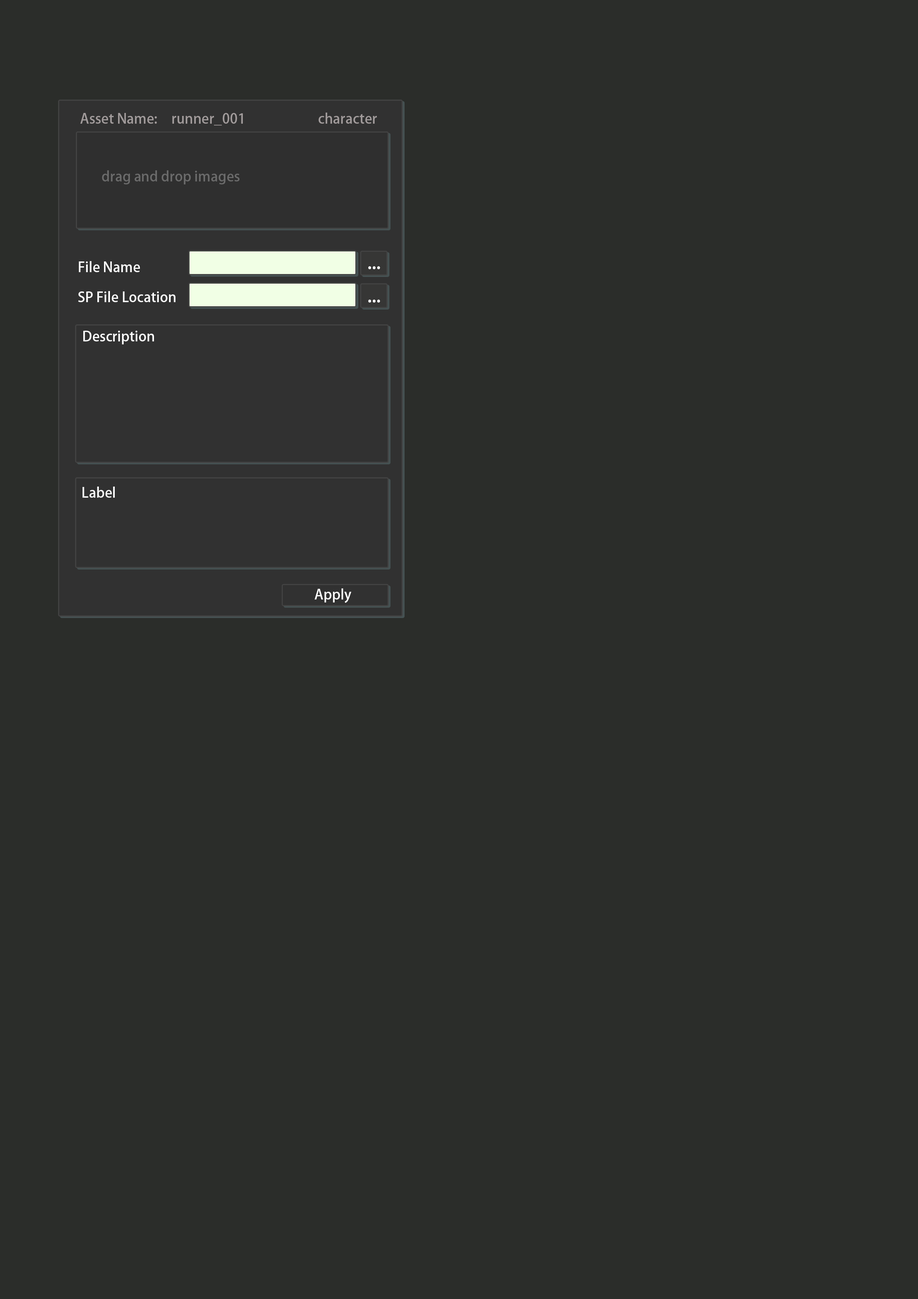
<style>
.page{position:relative;width:918px;height:1299px;background:#2b2d2a}
.page>*{position:absolute;margin:0}
.t1{font:13.9px "AdobeFanHeitiStd-Bold";color:#a19b9b}
.t2{font:13.9px "AdobeFanHeitiStd-Bold";color:#6b6b6b}
.t3{font:13.9px "AdobeFanHeitiStd-Bold";color:#ffffff}
.t4{font:18.5px "AdobeFanHeitiStd-Bold";color:#ffffff}
</style>
<div class="page">
<p class="t1" style="left:80px;top:113px;width:77px;height:11px">Asset Name:</p>
<p class="t1" style="left:172px;top:113px;width:71px;height:13px">runner_001</p>
<p class="t1" style="left:318px;top:113px;width:59px;height:11px">character</p>
<p class="t2" style="left:102px;top:170px;width:138px;height:14px">drag and drop images</p>
<p class="t3" style="left:79px;top:261px;width:61px;height:11px">File Name</p>
<p class="t4" style="left:368px;top:266px;width:12px;height:3px">...</p>
<p class="t3" style="left:78px;top:291px;width:97px;height:11px">SP File Location</p>
<p class="t4" style="left:368px;top:300px;width:12px;height:2px">...</p>
<p class="t3" style="left:83px;top:331px;width:71px;height:13px">Description</p>
<p class="t3" style="left:83px;top:486px;width:32px;height:12px">Label</p>
<p class="t3" style="left:315px;top:588px;width:36px;height:15px">Apply</p>
</div>
